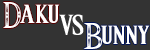
<style>
.page{position:relative;width:150px;height:50px;background:#333333}
.page>*{position:absolute;margin:0}
.t1{font:30px "Triforce";color:#ffffff}
.t2{font:33.5px "Triforce";color:#ffffff}
</style>
<div class="page">
<p class="t1" style="left:3px;top:2px;width:57px;height:26px">Daku</p>
<p class="t2" style="left:59px;top:14px;width:25px;height:21px">vs</p>
<p class="t1" style="left:83px;top:23px;width:67px;height:26px">Bunny</p>
</div>
